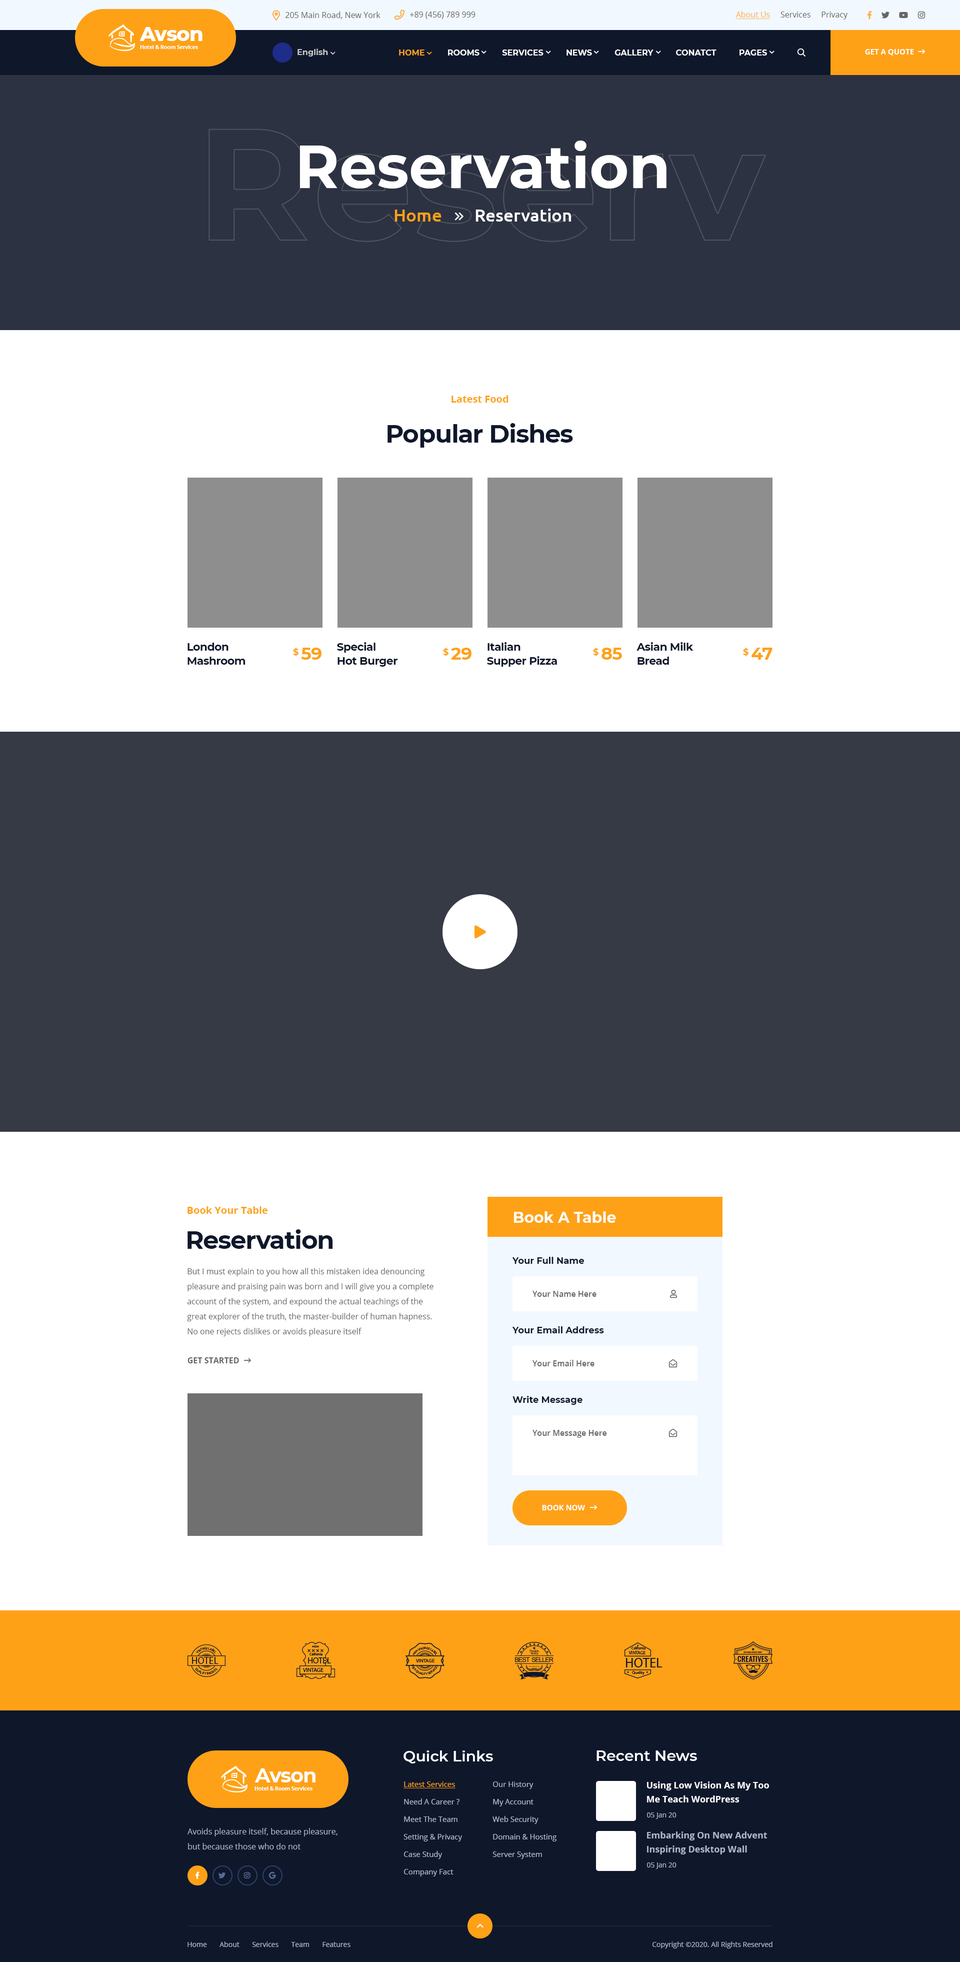
<style>
.page{position:relative;width:960px;height:1962px;background:#ffffff}
.page>*{position:absolute;margin:0}
.t1{font:8px "OpenSans-Regular";color:#666565}
.t2{font:8px "OpenSans-Regular";color:#ffac41;text-decoration:underline}
.t3{font:20px "Montserrat-ExtraBold";letter-spacing:-0.03em;color:#ffffff}
.t4{font:5.5px "OpenSans-Bold";letter-spacing:-0.03em;color:#ffffff}
.t5{font:8px "Montserrat-Bold";color:#c8c8c8}
.t6{font:8px "Montserrat-Bold";color:#ffffff;text-transform:uppercase}
.t7{font:8px "Montserrat-Bold";color:#fea116;text-transform:uppercase}
.t8{font:7.5px "OpenSans-Bold";color:#ffffff;text-transform:uppercase}
.t9{font:60px "Montserrat-Bold";color:#ffffff}
.t10{font:17.5px "Ubuntu-Medium";color:#ffffff}
.t11{font:17.5px "Ubuntu-Medium";color:#fea116}
.t12{font:10px "OpenSans-Bold";color:#fea116}
.t13{font:25px "Montserrat-Bold";letter-spacing:-0.03em;color:#0f172b}
.t14{font:11px/14px "Montserrat-Bold";letter-spacing:-0.03em;color:#0f172b}
.t15{font:9px "Montserrat-Bold";letter-spacing:-0.03em;color:#fea116}
.t16{font:17.5px "Montserrat-Bold";letter-spacing:-0.03em;color:#fea116}
.t17{font:15px "Montserrat-Bold";color:#ffffff}
.t18{font:9px "Montserrat-Bold";color:#0f172b}
.t19{font:8px/15px "OpenSans-Regular";color:#666565}
.t20{font:8px "OpenSans-SemiBold";color:#666565}
.t21{font:8px "OpenSans-Bold";color:#666565;text-transform:uppercase}
.t22{font:15px "Montserrat-SemiBold";color:#ffffff}
.t23{font:20px "Montserrat-Bold";letter-spacing:-0.03em;color:#ffffff}
.t24{font:7.5px/17.5px "OpenSans-Regular";color:#aeb7ca}
.t25{font:7.5px/17.5px "OpenSans-Regular";color:#fea116;text-decoration:underline}
.t26{font:9px/14px "OpenSans-Bold";color:#ffffff}
.t27{font:7px "OpenSans-Regular";color:#aeb7ca}
.t28{font:8px/15px "OpenSans-Regular";color:#aeb7ca}
.t29{font:9px/14px "OpenSans-Bold";color:#aeb7ca}
</style>
<div class="page">
<p class="t1" style="left:285px;top:12px;width:95px;height:7px">205 Main Road, New York</p>
<p class="t1" style="left:410px;top:12px;width:66px;height:7px">+89 (456) 789 999</p>
<p class="t1" style="left:736px;top:11px;width:112px;height:9px"><span class="t2">About Us</span>     Services     Privacy</p>
<p class="t3" style="left:140px;top:27px;width:62px;height:14px">Avson</p>
<p class="t4" style="left:140px;top:45px;width:58px;height:4px">Hotel &amp; Room Services</p>
<p class="t5" style="left:298px;top:48px;width:30px;height:8px">English</p>
<p class="t6" style="left:399px;top:50px;width:368px;height:6px"><span class="t7">HOME</span>          Rooms          Services          News          gallery          Conatct          Pages</p>
<p class="t8" style="left:865px;top:49px;width:49px;height:7px">Get a quote</p>
<p class="t9" style="left:300px;top:140px;width:366px;height:48px">Reservation</p>
<p class="t10" style="left:394px;top:208px;width:177px;height:14px"><span class="t11">Home</span>        Reservation</p>
<p class="t12" style="left:452px;top:395px;width:56px;height:7px">Latest Food</p>
<p class="t13" style="left:388px;top:423px;width:185px;height:25px">Popular Dishes</p>
<p class="t14" style="left:188px;top:642px;width:58px;height:22px">London <br>Mashroom</p>
<p class="t15" style="left:293px;top:648px;width:5px;height:8px">$</p>
<p class="t16" style="left:301px;top:648px;width:21px;height:12px">59</p>
<p class="t14" style="left:337px;top:642px;width:61px;height:24px">Special<br>Hot Burger</p>
<p class="t15" style="left:443px;top:648px;width:5px;height:8px">$</p>
<p class="t16" style="left:451px;top:648px;width:21px;height:12px">29</p>
<p class="t14" style="left:487px;top:642px;width:70px;height:24px">Italian<br>Supper Pizza</p>
<p class="t15" style="left:593px;top:648px;width:5px;height:8px">$</p>
<p class="t16" style="left:602px;top:648px;width:20px;height:12px">85</p>
<p class="t14" style="left:636px;top:642px;width:58px;height:22px">Asian Milk <br>Bread</p>
<p class="t15" style="left:743px;top:648px;width:5px;height:8px">$</p>
<p class="t16" style="left:752px;top:648px;width:20px;height:12px">47</p>
<p class="t12" style="left:188px;top:1206px;width:80px;height:8px">Book Your Table</p>
<p class="t17" style="left:514px;top:1211px;width:102px;height:11px">Book A Table</p>
<p class="t13" style="left:188px;top:1229px;width:145px;height:19px">Reservation</p>
<p class="t18" style="left:512px;top:1256px;width:72px;height:8px">Your Full Name</p>
<p class="t19" style="left:187px;top:1268px;width:247px;height:68px">But I must explain to you how all this mistaken idea denouncing pleasure and praising pain was born and I will give you a complete account of the system, and expound the actual teachings of the great explorer of the truth, the master-builder of human hapness. No one rejects dislikes or avoids pleasure itself</p>
<p class="t20" style="left:532px;top:1290px;width:64px;height:6px">Your Name Here</p>
<p class="t18" style="left:512px;top:1326px;width:92px;height:7px">Your Email Address</p>
<p class="t21" style="left:188px;top:1357px;width:51px;height:6px">Get Started</p>
<p class="t20" style="left:532px;top:1360px;width:62px;height:6px">Your Email Here</p>
<p class="t18" style="left:512px;top:1396px;width:70px;height:8px">Write Message</p>
<p class="t20" style="left:532px;top:1430px;width:75px;height:8px">Your Message Here</p>
<p class="t8" style="left:542px;top:1504px;width:43px;height:6px">Book Now</p>
<p class="t22" style="left:404px;top:1750px;width:89px;height:13px">Quick Links</p>
<p class="t22" style="left:596px;top:1750px;width:101px;height:10px">Recent News</p>
<p class="t23" style="left:254px;top:1768px;width:62px;height:14px">Avson</p>
<p class="t24" style="left:404px;top:1781px;width:58px;height:95px"><span class="t25">Latest Services<br></span>Need A Career ?<br>Meet The Team<br>Setting &amp; Privacy<br>Case Study<br>Company Fact</p>
<p class="t24" style="left:492px;top:1781px;width:64px;height:77px">Our History<br>My Account<br>Web Security<br>Domain &amp; Hosting<br>Server System</p>
<p class="t26" style="left:647px;top:1781px;width:122px;height:21px">Using Low Vision As My Too<br>Me Teach WordPress</p>
<p class="t4" style="left:254px;top:1786px;width:58px;height:4px">Hotel &amp; Room Services</p>
<p class="t27" style="left:647px;top:1812px;width:29px;height:6px">05 Jan 20</p>
<p class="t28" style="left:188px;top:1828px;width:150px;height:21px">Avoids pleasure itself, because pleasure, <br>but because those who do not</p>
<p class="t29" style="left:647px;top:1831px;width:120px;height:23px">Embarking On New Advent<br>Inspiring Desktop Wall</p>
<p class="t27" style="left:647px;top:1862px;width:29px;height:6px">05 Jan 20</p>
<p class="t27" style="left:188px;top:1941px;width:162px;height:5px">Home       About       Services       Team       Features</p>
<p class="t27" style="left:652px;top:1941px;width:120px;height:7px">Copyright ©2020. All Rights Reserved</p>
</div>
